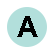
<style>
.page{position:relative;width:54px;height:54px;background:#ffffff}
.page>*{position:absolute;margin:0}
.t1{font:29.6px "BreezeSans-Bold";color:#000000}
</style>
<div class="page">
<p class="t1" style="left:17px;top:16px;width:21px;height:21px">A</p>
</div>
